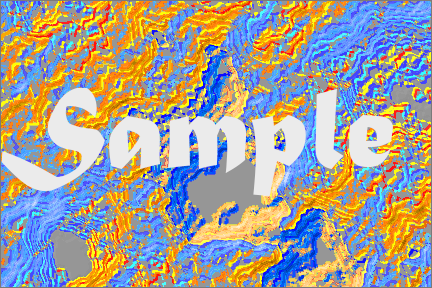
<style>
.page{position:relative;width:432px;height:288px;background:#969696}
.page>*{position:absolute;margin:0}
.t1{font:120px "MaturaMTScriptCapitals";color:#ebebeb}
</style>
<div class="page">
<p class="t1" style="left:1px;top:88px;width:392px;height:108px">Sample</p>
</div>
